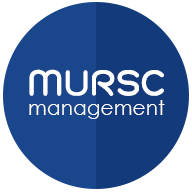
<style>
.page{position:relative;width:192px;height:192px;background:#1a468c}
.page>*{position:absolute;margin:0}
.t1{font:52px "THKodchasal-Bold";color:#ffffff}
.t2{font:20.2px "CenturyGothic";color:#ffffff}
</style>
<div class="page">
<p class="t1" style="left:29px;top:69px;width:135px;height:27px">MURSC</p>
<p class="t2" style="left:29px;top:100px;width:136px;height:19px">management</p>
</div>
